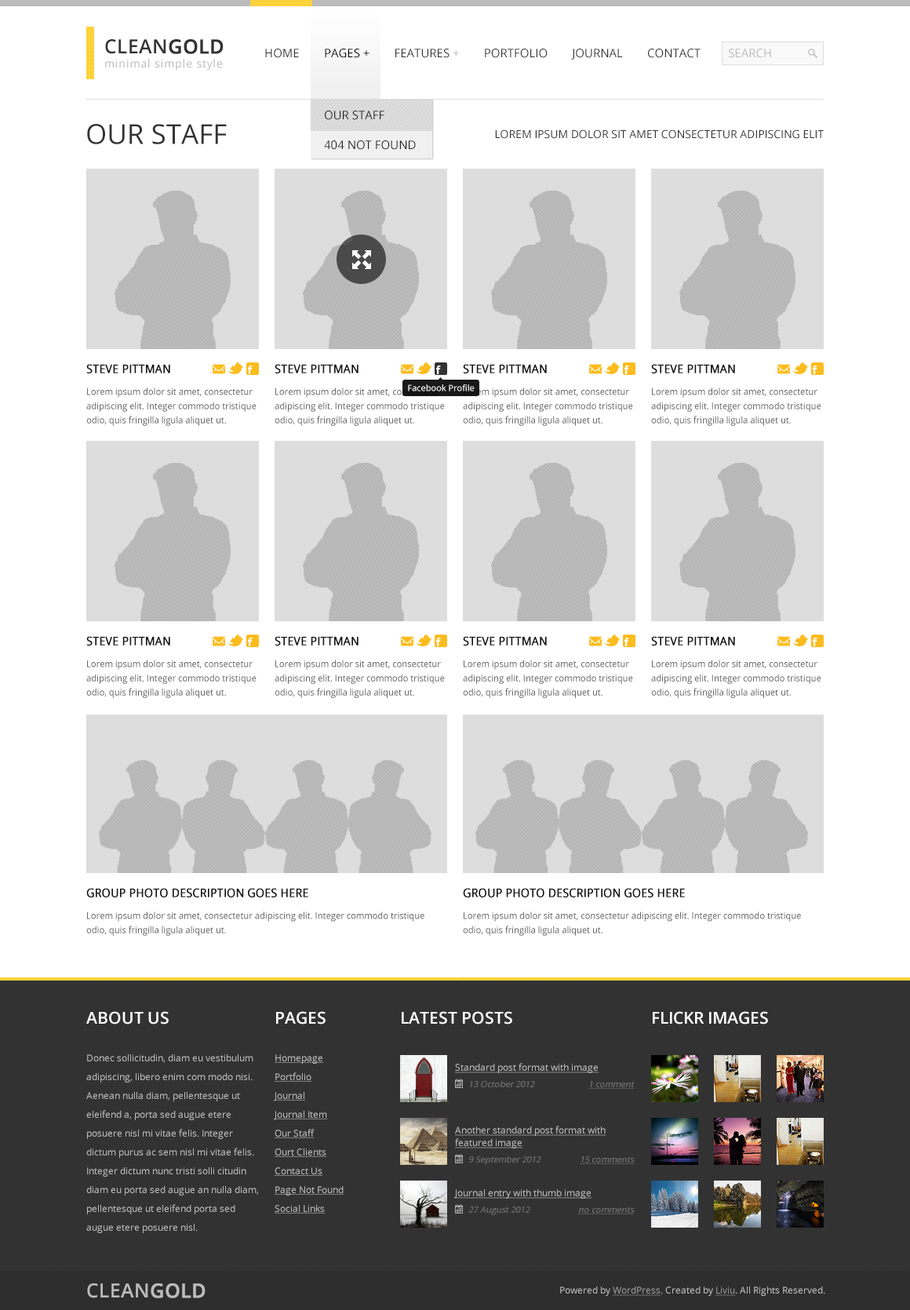
<style>
.page{position:relative;width:910px;height:1310px;background:#ffffff}
.page>*{position:absolute;margin:0}
.t1{font:11px/14.1px "OpenSans";letter-spacing:0.045em;color:#bbbbbb}
.t2{font:19.6px/14.1px "OpenSans-Semibold";color:#333333;text-transform:uppercase}
.t3{font:19.6px/14.1px "OpenSans-Semibold";color:#333333;text-transform:uppercase;font-weight:bold}
.t4{font:11.8px "OpenSans";color:#333333;text-transform:uppercase}
.t5{font:11.8px "OpenSans";color:#000000;text-transform:uppercase}
.t6{font:11.8px "OpenSans";color:#bbbbbb;text-transform:uppercase}
.t7{font:11.8px/29.8px "OpenSans";color:#222222;text-transform:uppercase}
.t8{font:27.5px "OpenSans";color:#333333;text-transform:uppercase}
.t9{font:11px "OpenSans";color:#333333;text-transform:uppercase}
.t10{font:9.4px/14.1px "OpenSans";color:#666666;scale:0.93 1}
.t11{font:11.8px/14.1px "OpenSans";color:#111111;text-transform:uppercase;font-weight:bold;scale:0.93 1}
.t12{font:8.6px "OpenSans";color:#ffffff}
.t13{font:9.4px/18.8px "OpenSans";color:#bbbbbb}
.t14{font:16.5px/18.8px "OpenSans-Semibold";color:#fefefe;text-transform:uppercase}
.t15{font:9.4px/18.8px "OpenSans";color:#bbbbbb;text-decoration:underline}
.t16{font:16.5px "OpenSans-Semibold";color:#fefefe;text-transform:uppercase}
.t17{font:9.4px "OpenSans";color:#bbbbbb;text-decoration:underline}
.t18{font:8.6px "OpenSans";color:#777777;font-style:italic}
.t19{font:8.6px "OpenSans";color:#777777;font-style:italic;text-decoration:underline}
.t20{font:9.4px/12.6px "OpenSans";color:#bbbbbb;text-decoration:underline}
.t21{font:19.6px "OpenSans-Semibold";color:#bbbbbb;text-transform:uppercase}
.t22{font:19.6px "OpenSans-Semibold";color:#bbbbbb;text-transform:uppercase;font-weight:bold}
.t23{font:9.4px "OpenSans";color:#bbbbbb}
.t24{font:9.4px "OpenSans";color:#999999;text-decoration:underline}
</style>
<div class="page">
<p class="t1" style="left:105px;top:39px;width:119px;height:32px"><span class="t2">Clean</span><span class="t3">Gold<br></span>minimal simple style</p>
<p class="t4" style="left:265px;top:49px;width:436px;height:11px">Home        <span class="t5">Pages +</span>        Features <span class="t6">+</span>        Portfolio        JOURNAL        Contact</p>
<p class="t6" style="left:729px;top:49px;width:42px;height:9px">Search</p>
<p class="t7" style="left:324px;top:111px;width:92px;height:39px">Our Staff<br>404 Not Found</p>
<p class="t8" style="left:87px;top:124px;width:140px;height:20px">Our Staff</p>
<p class="t9" style="left:495px;top:129px;width:329px;height:10px">Lorem ipsum dolor sit amet consectetur adipiscing elit</p>
<p class="t10" style="left:86px;top:364px;width:171px;height:62px"><span class="t11">Steve Pittman<br><br></span>Lorem ipsum dolor sit amet, consectetur adipiscing elit. Integer commodo tristique odio, quis fringilla ligula aliquet ut.</p>
<p class="t10" style="left:275px;top:364px;width:170px;height:62px"><span class="t11">Steve Pittman<br><br></span>Lorem ipsum dolor sit amet, consectetur adipiscing elit. Integer commodo tristique odio, quis fringilla ligula aliquet ut.</p>
<p class="t10" style="left:463px;top:364px;width:170px;height:62px"><span class="t11">Steve Pittman<br><br></span>Lorem ipsum dolor sit amet, consectetur adipiscing elit. Integer commodo tristique odio, quis fringilla ligula aliquet ut.</p>
<p class="t10" style="left:651px;top:364px;width:170px;height:62px"><span class="t11">Steve Pittman<br><br></span>Lorem ipsum dolor sit amet, consectetur adipiscing elit. Integer commodo tristique odio, quis fringilla ligula aliquet ut.</p>
<p class="t12" style="left:408px;top:384px;width:67px;height:7px">Facebook Profile</p>
<p class="t10" style="left:86px;top:636px;width:171px;height:62px"><span class="t11">Steve Pittman<br><br></span>Lorem ipsum dolor sit amet, consectetur adipiscing elit. Integer commodo tristique odio, quis fringilla ligula aliquet ut.</p>
<p class="t10" style="left:275px;top:636px;width:170px;height:62px"><span class="t11">Steve Pittman<br><br></span>Lorem ipsum dolor sit amet, consectetur adipiscing elit. Integer commodo tristique odio, quis fringilla ligula aliquet ut.</p>
<p class="t10" style="left:463px;top:636px;width:170px;height:62px"><span class="t11">Steve Pittman<br><br></span>Lorem ipsum dolor sit amet, consectetur adipiscing elit. Integer commodo tristique odio, quis fringilla ligula aliquet ut.</p>
<p class="t10" style="left:651px;top:636px;width:170px;height:62px"><span class="t11">Steve Pittman<br><br></span>Lorem ipsum dolor sit amet, consectetur adipiscing elit. Integer commodo tristique odio, quis fringilla ligula aliquet ut.</p>
<p class="t10" style="left:86px;top:888px;width:338px;height:48px"><span class="t11">Group Photo Description goes here<br><br></span>Lorem ipsum dolor sit amet, consectetur adipiscing elit. Integer commodo tristique odio, quis fringilla ligula aliquet ut.</p>
<p class="t10" style="left:463px;top:888px;width:338px;height:48px"><span class="t11">Group Photo Description goes here<br><br></span>Lorem ipsum dolor sit amet, consectetur adipiscing elit. Integer commodo tristique odio, quis fringilla ligula aliquet ut.</p>
<p class="t13" style="left:86px;top:1011px;width:172px;height:222px"><span class="t14">About US<br><br></span>Donec sollicitudin, diam eu vestibulum adipiscing, libero enim com modo nisi. Aenean nulla diam, pellentesque ut eleifend a, porta sed augue etere posuere nisl mi vitae felis. Integer dictum purus ac sem nisl mi vitae felis. Integer dictum nunc tristi solli citudin diam eu porta sed augue an nulla diam, pellentesque ut eleifend porta sed augue etere posuere nisl.</p>
<p class="t15" style="left:274px;top:1011px;width:70px;height:203px"><span class="t14">Pages<br><br></span>Homepage<br>Portfolio<br>Journal<br>Journal Item<br>Our Staff<br>Ourt Clients<br>Contact Us<br>Page Not Found<br>Social Links</p>
<p class="t16" style="left:402px;top:1011px;width:110px;height:14px">Latest Posts</p>
<p class="t16" style="left:653px;top:1011px;width:115px;height:14px">Flickr Images</p>
<p class="t17" style="left:455px;top:1063px;width:144px;height:10px">Standard post format with image</p>
<p class="t18" style="left:470px;top:1080px;width:65px;height:7px">13 October 2012</p>
<p class="t19" style="left:588px;top:1081px;width:47px;height:8px">1 comment</p>
<p class="t20" style="left:455px;top:1126px;width:151px;height:23px">Another standard post format with featured image</p>
<p class="t18" style="left:469px;top:1156px;width:72px;height:9px">9 September 2012</p>
<p class="t19" style="left:580px;top:1156px;width:55px;height:8px">15 comments</p>
<p class="t17" style="left:454px;top:1189px;width:138px;height:10px">Journal entry with thumb image</p>
<p class="t18" style="left:468px;top:1207px;width:62px;height:8px">27 August 2012</p>
<p class="t19" style="left:578px;top:1207px;width:57px;height:8px">no comments</p>
<p class="t21" style="left:87px;top:1284px;width:119px;height:14px">Clean<span class="t22">gold</span></p>
<p class="t23" style="left:560px;top:1287px;width:265px;height:9px">Powered by <span class="t24">WordPress</span>. Created by <span class="t24">Liviu</span>. All Rights Reserved.</p>
</div>
